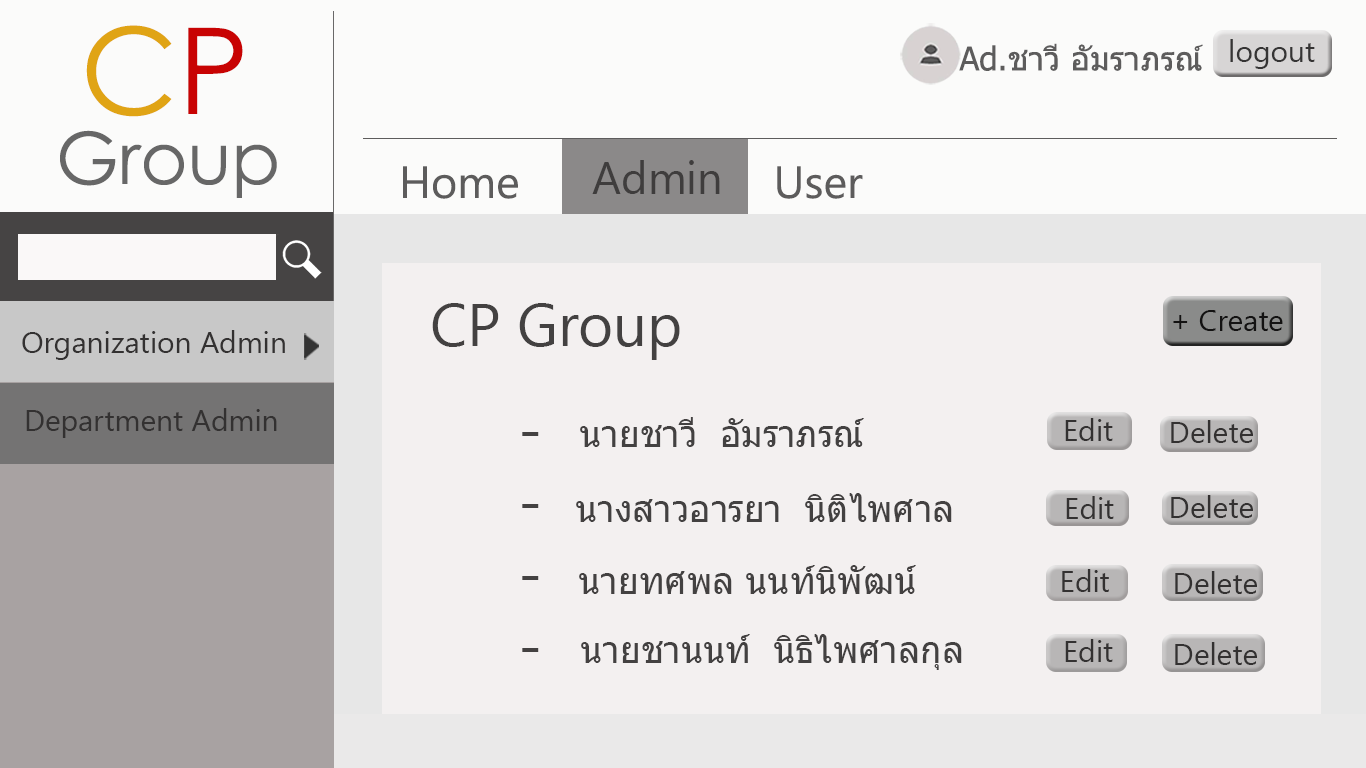
<style>
.page{position:relative;width:1366px;height:768px;background:#f3f0f0}
.page>*{position:absolute;margin:0}
.t1{font:120px "CenturyGothic";color:#e0a415}
.t2{font:120px "CenturyGothic";color:#c80303}
.t3{font:30px "SegoeUI";color:#353434}
.t4{font:33px "Tahoma";color:#5d5c5c}
.t5{font:72px "CenturyGothic";color:#676767}
.t6{font:45px "SegoeUI";color:#3f3d3d}
.t7{font:45px "SegoeUI";color:#5d5c5c}
.t8{font:60px "SegoeUI";color:#434141}
.t9{font:30px "SegoeUI";color:#131212}
.t10{font:30px "SegoeUI";color:#333131}
.t11{font:36px "Tahoma";color:#434141}
</style>
<div class="page">
<p class="t1" style="left:86px;top:25px;width:157px;height:92px">C<span class="t2">P</span></p>
<p class="t3" style="left:1230px;top:39px;width:85px;height:30px">logout</p>
<p class="t4" style="left:959px;top:43px;width:244px;height:28px">Ad.ชาวี อัมราภรณ์</p>
<p class="t5" style="left:60px;top:130px;width:217px;height:68px">Group</p>
<p class="t6" style="left:592px;top:160px;width:128px;height:34px">Admin</p>
<p class="t7" style="left:403px;top:164px;width:460px;height:35px">Home        Admin  User</p>
<p class="t8" style="left:432px;top:303px;width:248px;height:57px">CP Group</p>
<p class="t9" style="left:1173px;top:310px;width:110px;height:21px">+ Create</p>
<p class="t10" style="left:22px;top:330px;width:263px;height:30px">Organization Admin</p>
<p class="t10" style="left:26px;top:408px;width:251px;height:30px">Department Admin</p>
<p class="t11" style="left:580px;top:417px;width:284px;height:30px">นายชาวี  อัมราภรณ์</p>
<p class="t10" style="left:1065px;top:418px;width:48px;height:23px">Edit</p>
<p class="t10" style="left:1171px;top:420px;width:82px;height:23px">Delete</p>
<p class="t8" style="left:522px;top:432px;width:17px;height:220px">-<br>-<br>-<br>-</p>
<p class="t11" style="left:576px;top:493px;width:376px;height:29px">นางสาวอารยา  นิติไพศาล</p>
<p class="t10" style="left:1066px;top:496px;width:48px;height:23px">Edit</p>
<p class="t10" style="left:1171px;top:495px;width:82px;height:23px">Delete</p>
<p class="t11" style="left:579px;top:565px;width:337px;height:29px">นายทศพล นนท์นิพัฒน์</p>
<p class="t10" style="left:1062px;top:569px;width:47px;height:23px">Edit</p>
<p class="t10" style="left:1175px;top:571px;width:82px;height:23px">Delete</p>
<p class="t11" style="left:581px;top:634px;width:381px;height:36px">นายชานนท์  นิธิไพศาลกุล</p>
<p class="t10" style="left:1065px;top:639px;width:48px;height:23px">Edit</p>
<p class="t10" style="left:1175px;top:642px;width:82px;height:23px">Delete</p>
</div>
